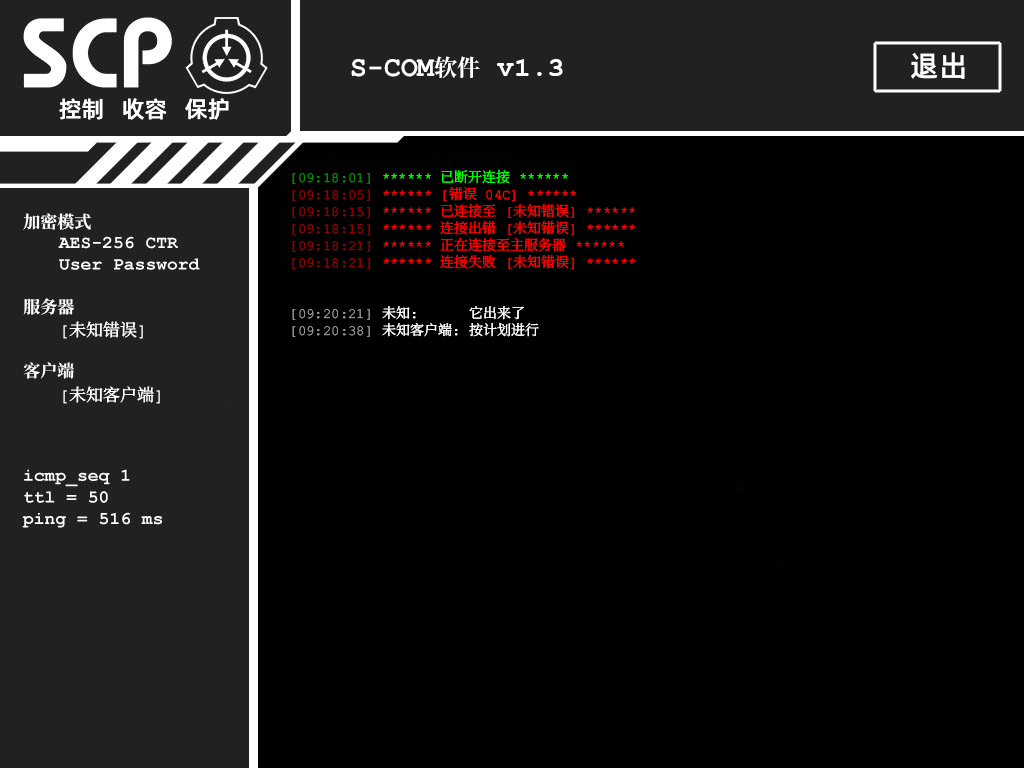
<style>
.page{position:relative;width:1024px;height:768px;background:#010101}
.page>*{position:absolute;margin:0}
.t1{font:29px "AlibabaPuHuiTiM";color:#ffffff}
.t2{font:28px "ContainmentBreach-Bold";color:#ffffff}
.t3{font:23px "ContainmentBreach-Bold";color:#ffffff}
.t4{font:28px "CourierNewPS-BoldMT";color:#ffffff}
.t5{font:23px "AlibabaPuHuiTiM";color:#ffffff}
.t6{font:14px/17px "ContainmentBreach-Regular";color:#ff0000}
.t7{font:14px/17px "ContainmentBreach-Regular";color:#009600}
.t8{font:14px/17px "ContainmentBreach-Regular";color:#00ff00}
.t9{font:14px/17px "ContainmentBreach-Regular";color:#960000}
.t10{font:14px/17px "ContainmentBreach-Regular";color:#969696}
.t11{font:14px/17px "ContainmentBreach-Regular";color:#ffffff}
.t12{font:17px/24px "ContainmentBreach-Regular";color:#ffffff}
.t13{font:17px/17px "ContainmentBreach-Bold";color:#ffffff}
.t14{font:17px/23px "ContainmentBreach-Bold";color:#ffffff}
.t15{font:17px/17px "ContainmentBreach-Regular";color:#ffffff}
.t16{font:17px/24px "ContainmentBreach-Bold";color:#ffffff}
</style>
<div class="page">
<p class="t1" style="left:911px;top:52px;width:54px;height:27px">退出</p>
<p class="t2" style="left:351px;top:56px;width:212px;height:22px">S-COM<span class="t3">软件 </span><span class="t4">v1.3</span></p>
<p class="t5" style="left:59px;top:98px;width:170px;height:22px">控制   收容   保护</p>
<p class="t6" style="left:292px;top:170px;width:343px;height:167px"><span class="t7">[09:18：01]</span><span class="t8"> ****** 已断开连接 ******<br></span><span class="t9">[09:18:05]</span> ****** [错误 04C] ******<br><span class="t9">[09:18:15]</span> ****** 已连接至 [未知错误] ******<br><span class="t9">[09:18:15]</span> ****** 连接出错 [未知错误] ******<br><span class="t9">[09:18:21]</span> ****** 正在连接至主服务器 ******<br><span class="t9">[09:18:21]</span> ****** 连接失败 [未知错误] ******<br><br><br><span class="t10">【09:20:21】</span><span class="t11"> 未知：  它出来了<br></span><span class="t10">【09:20:38】</span><span class="t11"> 未知客户端： 按计划进行</span></p>
<p class="t12" style="left:23px;top:213px;width:137px;height:191px"><span class="t13">加密模式<br><br><br><br><br></span><span class="t14">服务器<br> </span><span class="t15">[未知错误]<br></span><span class="t16"><br>客户端<br> </span>[未知客户端]</p>
</div>
